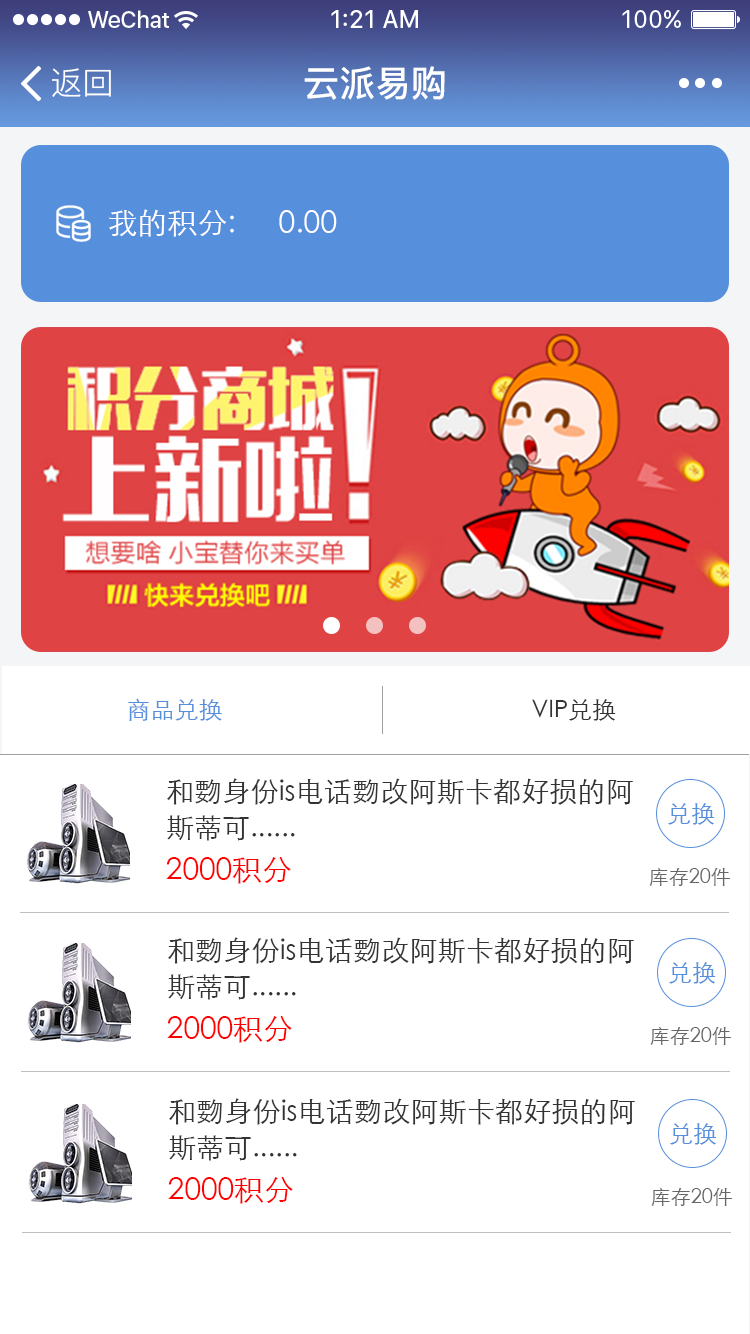
<style>
.page{position:relative;width:750px;height:1334px;background:#ffffff}
.page>*{position:absolute;margin:0}
.t1{font:32px "PingFang-SC-Regular";color:#ffffff}
.t2{font:36px "PingFang-SC-Bold";color:#ffffff}
.t3{font:30px "STXihei";color:#ffffff}
.t4{font:24px "STXihei";color:#568fdc}
.t5{font:24px "STXihei";color:#333333}
.t6{font:28px/36px "STXihei";color:#333333}
.t7{font:30px "STXihei";color:#ff0000}
.t8{font:20px "STXihei";color:#666666}
</style>
<div class="page">
<p class="t1" style="left:52px;top:68px;width:59px;height:29px">返回</p>
<p class="t2" style="left:304px;top:66px;width:141px;height:34px">云派易购</p>
<p class="t3" style="left:109px;top:209px;width:125px;height:28px">我的积分:</p>
<p class="t3" style="left:279px;top:210px;width:58px;height:23px">0.00</p>
<p class="t4" style="left:128px;top:698px;width:94px;height:23px">商品兑换</p>
<p class="t5" style="left:532px;top:699px;width:84px;height:22px">VIP兑换</p>
<p class="t6" style="left:167px;top:778px;width:466px;height:63px;text-align:justify">和覅身份is电话覅改阿斯卡都好损的阿斯蒂可......</p>
<p class="t4" style="left:668px;top:803px;width:47px;height:22px">兑换</p>
<p class="t7" style="left:166px;top:857px;width:125px;height:27px">2000积分</p>
<p class="t8" style="left:649px;top:867px;width:81px;height:19px">库存20件</p>
<p class="t6" style="left:168px;top:937px;width:466px;height:63px;text-align:justify">和覅身份is电话覅改阿斯卡都好损的阿斯蒂可......</p>
<p class="t4" style="left:669px;top:962px;width:47px;height:22px">兑换</p>
<p class="t7" style="left:167px;top:1016px;width:125px;height:27px">2000积分</p>
<p class="t8" style="left:650px;top:1026px;width:81px;height:19px">库存20件</p>
<p class="t6" style="left:169px;top:1098px;width:466px;height:63px;text-align:justify">和覅身份is电话覅改阿斯卡都好损的阿斯蒂可......</p>
<p class="t4" style="left:670px;top:1123px;width:47px;height:22px">兑换</p>
<p class="t7" style="left:168px;top:1177px;width:125px;height:27px">2000积分</p>
<p class="t8" style="left:651px;top:1187px;width:81px;height:19px">库存20件</p>
</div>
